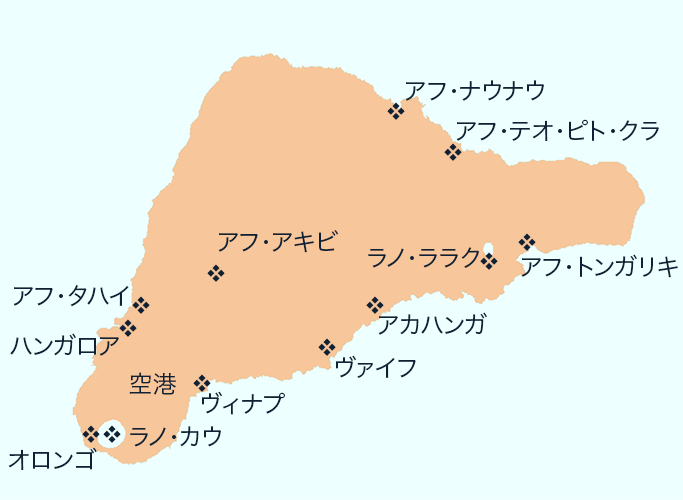
<style>
.page{position:relative;width:683px;height:500px;background:#eeffff}
.page>*{position:absolute;margin:0}
.t1{font:24px "HiraKakuProN-W3";color:#0e2135}
.t2{font:18px "HiraKakuProN-W3";color:#0e2135}
</style>
<div class="page">
<p class="t1" style="left:405px;top:80px;width:139px;height:21px">アフ・ナウナウ</p>
<p class="t2" style="left:387px;top:102px;width:18px;height:18px">◆</p>
<p class="t1" style="left:456px;top:119px;width:203px;height:22px">アフ・テオ・ピト・クラ</p>
<p class="t2" style="left:444px;top:143px;width:18px;height:18px">◆</p>
<p class="t1" style="left:218px;top:230px;width:121px;height:23px">アフ・アキビ</p>
<p class="t2" style="left:518px;top:233px;width:18px;height:18px">◆</p>
<p class="t1" style="left:368px;top:247px;width:112px;height:21px">ラノ・ララク</p>
<p class="t2" style="left:480px;top:252px;width:18px;height:18px">◆</p>
<p class="t1" style="left:521px;top:254px;width:157px;height:24px">ｱフ・トンガリキ</p>
<p class="t2" style="left:207px;top:264px;width:18px;height:18px">◆</p>
<p class="t1" style="left:13px;top:285px;width:116px;height:22px">アフ・タハイ</p>
<p class="t2" style="left:132px;top:296px;width:18px;height:18px">◆</p>
<p class="t2" style="left:366px;top:296px;width:18px;height:18px">◆</p>
<p class="t1" style="left:378px;top:312px;width:109px;height:23px">アカハンガ</p>
<p class="t2" style="left:119px;top:319px;width:18px;height:18px">◆</p>
<p class="t1" style="left:10px;top:333px;width:109px;height:23px">ハンガロア</p>
<p class="t2" style="left:318px;top:338px;width:18px;height:18px">◆</p>
<p class="t1" style="left:335px;top:355px;width:81px;height:23px">ヴァイフ</p>
<p class="t1" style="left:129px;top:372px;width:47px;height:23px">空港</p>
<p class="t2" style="left:193px;top:374px;width:18px;height:18px">◆</p>
<p class="t1" style="left:201px;top:391px;width:84px;height:24px">ヴィナプ</p>
<p class="t2" style="left:82px;top:425px;width:18px;height:18px">◆</p>
<p class="t2" style="left:103px;top:425px;width:18px;height:18px">◆</p>
<p class="t1" style="left:130px;top:426px;width:91px;height:21px">ラノ・カウ</p>
<p class="t1" style="left:8px;top:447px;width:89px;height:23px">オロンゴ</p>
</div>
